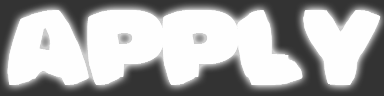
<style>
.page{position:relative;width:384px;height:96px;background:#fefefe}
.page>*{position:absolute;margin:0}
.t1{font:100px "Bomberman";color:#fefefe}
</style>
<div class="page">
<p class="t1" style="left:7px;top:10px;width:374px;height:75px">Apply</p>
<p class="t1" style="left:7px;top:10px;width:374px;height:75px">Apply</p>
</div>
